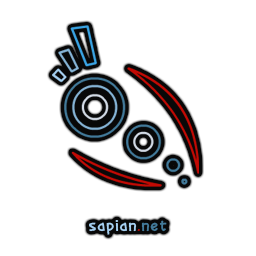
<style>
.page{position:relative;width:256px;height:256px;background:#ffffff}
.page>*{position:absolute;margin:0}
.t1{font:18px "01tama";color:#a5cff0}
.t2{font:18px "01tama";color:#bc0a04}
.t3{font:18px "01tama";color:#427a9a}
</style>
<div class="page">
<p class="t1" style="left:89px;top:220px;width:78px;height:15px">sapian<span class="t2">.</span><span class="t3">net</span></p>
</div>
